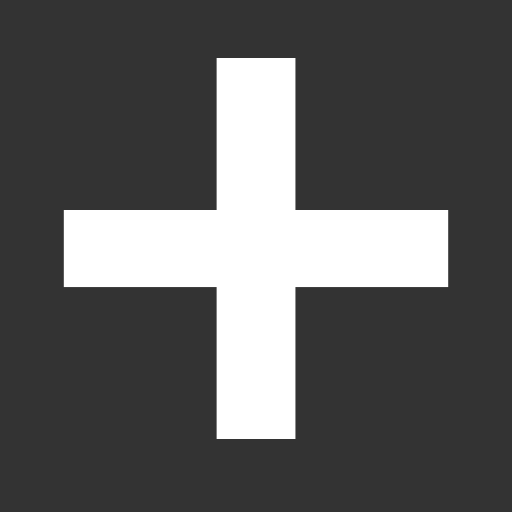
<style>
.page{position:relative;width:512px;height:512px;background:#333333}
.page>*{position:absolute;margin:0}
.t1{font:611px "Tahoma-Bold";color:#ffffff}
</style>
<div class="page">
<p class="t1" style="left:63px;top:58px;width:386px;height:381px">+</p>
</div>
